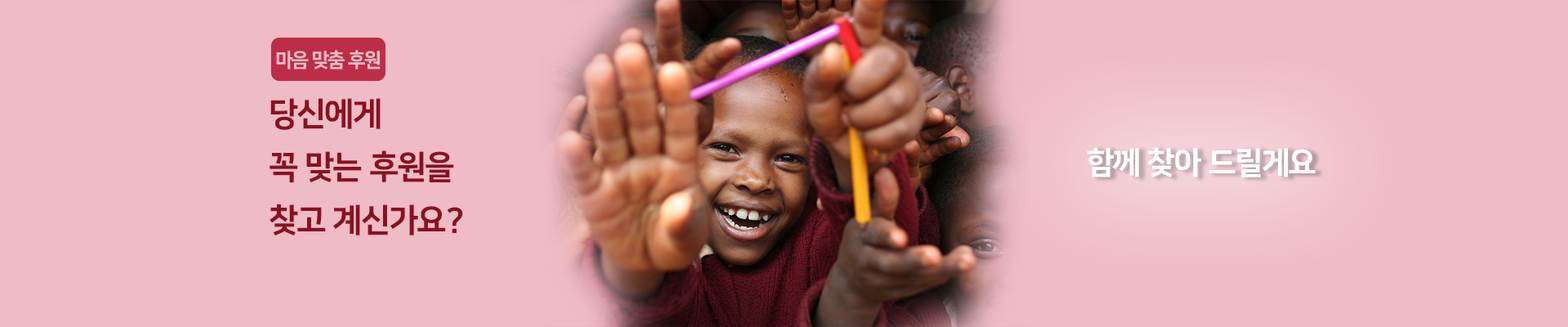
<style>
.page{position:relative;width:1568px;height:327px;background:#efbbc5}
.page>*{position:absolute;margin:0}
.t1{font:19.6px "NanumSquare_acEB";letter-spacing:-0.04em;color:#efbbc5}
.t2{font:32.7px/53.1px "NanumSquare_acEB";color:#8a1023}
.t3{font:31px "NanumSquare_acEB";color:#ffffff}
</style>
<div class="page">
<p class="t1" style="left:276px;top:50px;width:105px;height:19px">마음 맞춤 후원</p>
<p class="t2" style="left:270px;top:98px;width:193px;height:137px">당신에게 <br>꼭 맞는 후원을 <br>찾고 계신가요?</p>
<p class="t3" style="left:1087px;top:147px;width:229px;height:30px">함께 찾아 드릴게요</p>
</div>
